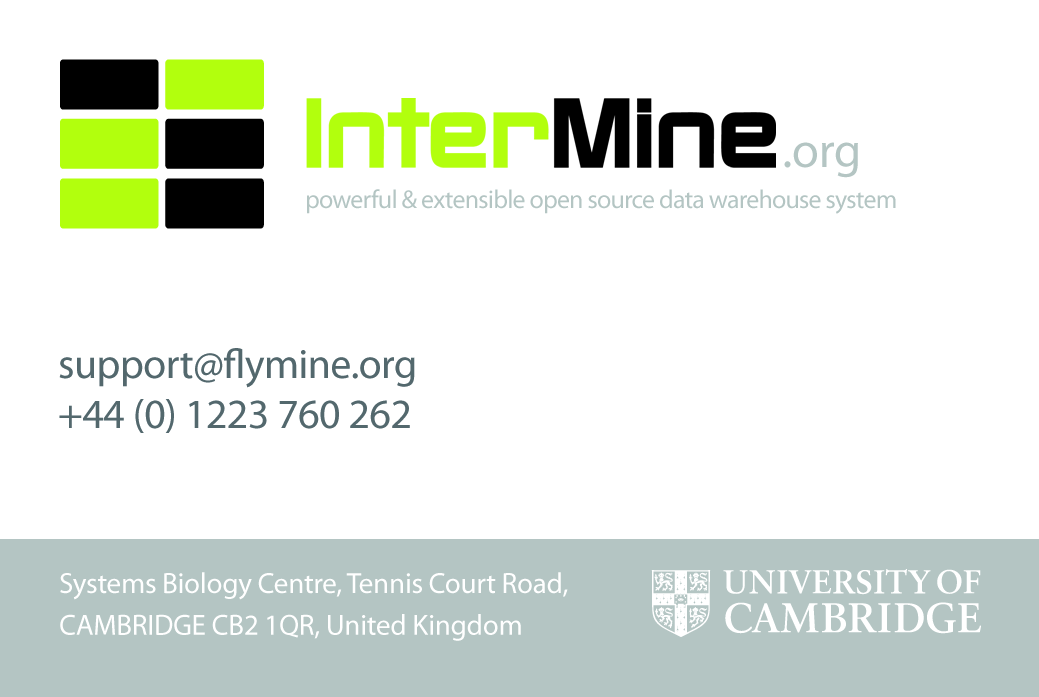
<style>
.page{position:relative;width:1039px;height:697px;background:#ffffff}
.page>*{position:absolute;margin:0}
.t1{font:49.6px "MyriadPro-Regular";letter-spacing:-0.01em;color:#b3c5c3}
.t2{font:26px "MyriadPro-Regular";letter-spacing:-0.03em;color:#b3c5c3}
.t3{font:41.7px "MyriadPro-Regular";letter-spacing:-0.01em;color:#53686d}
.t4{font:29.2px/41.7px "MyriadPro-Regular";letter-spacing:-0.01em;color:#ffffff}
</style>
<div class="page">
<p class="t1" style="left:784px;top:142px;width:74px;height:36px">.org</p>
<p class="t2" style="left:307px;top:189px;width:589px;height:25px">powerful &amp; extensible open source data warehouse system</p>
<p class="t3" style="left:59px;top:348px;width:356px;height:85px">support@flymine.org<br>+44 (0) 1223 760 262</p>
<p class="t4" style="left:60px;top:572px;width:508px;height:69px">Systems Biology Centre, Tennis Court Road,<br>CAMBRIDGE CB2 1QR, United Kingdom</p>
</div>
